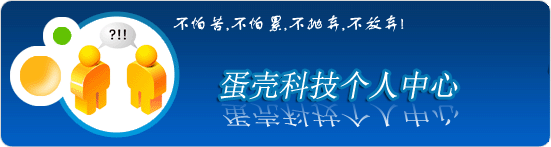
<style>
.page{position:relative;width:551px;height:147px}
.page>*{position:absolute;margin:0}
.t1{font:18px "FZSTK--GBK1-0";color:#ffffff}
.t2{font:30px "NSimSun";color:#ffffff;font-style:italic}
.t3{font:25.5px "NSimSun";font-style:italic;scale:1.18 1}
</style>
<div class="page">
<p class="t1" style="left:173px;top:15px;width:231px;height:17px">不怕苦,不怕累,不抛弃,不放弃!</p>
<p class="t2" style="left:220px;top:71px;width:238px;height:29px">蛋壳科技个人中心</p>
<p class="t3" style="left:221px;top:103px;width:238px;height:24px">蛋壳科技个人中心</p>
</div>
